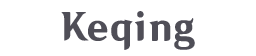
<style>
.page{position:relative;width:256px;height:56px;background:#ffffff}
.page>*{position:absolute;margin:0}
.t1{font:36px "HYWenHei-HEW";color:#4f4e57}
</style>
<div class="page">
<p class="t1" style="left:61px;top:11px;width:134px;height:39px">Keqing</p>
</div>
